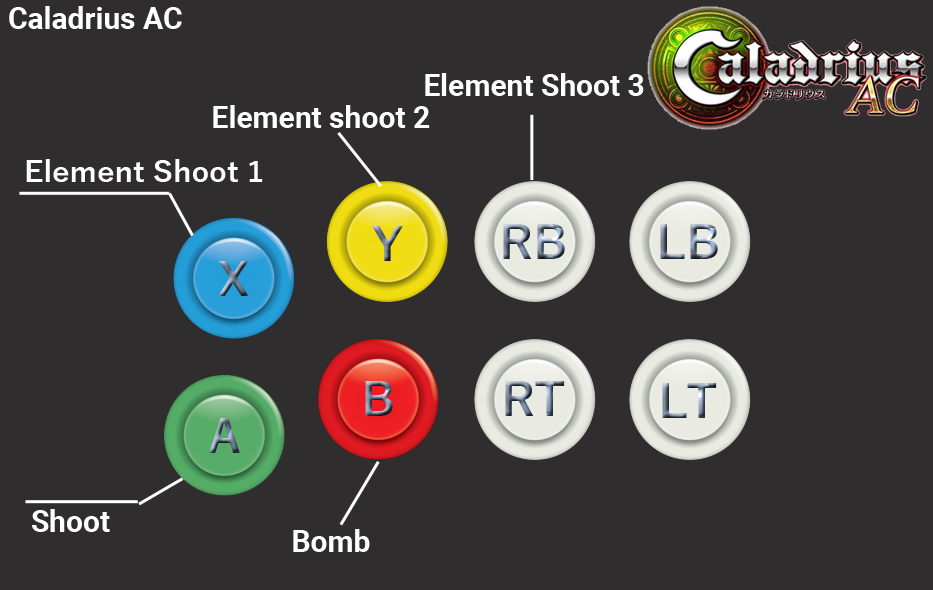
<style>
.page{position:relative;width:933px;height:590px;background:#2f2d2e}
.page>*{position:absolute;margin:0}
.t1{font:30px "Roboto-Bold";color:#ffffff}
.t2{font:30px "YuGothic-Bold";color:#ffffff}
</style>
<div class="page">
<p class="t1" style="left:9px;top:6px;width:173px;height:23px">Caladrius AC</p>
<p class="t1" style="left:425px;top:73px;width:219px;height:23px">Element Shoot 3</p>
<p class="t1" style="left:213px;top:105px;width:217px;height:23px">Element shoot 2</p>
<p class="t2" style="left:26px;top:159px;width:237px;height:23px">Element Shoot 1</p>
<p class="t1" style="left:32px;top:509px;width:78px;height:23px">Shoot</p>
<p class="t1" style="left:293px;top:529px;width:77px;height:23px">Bomb</p>
</div>
